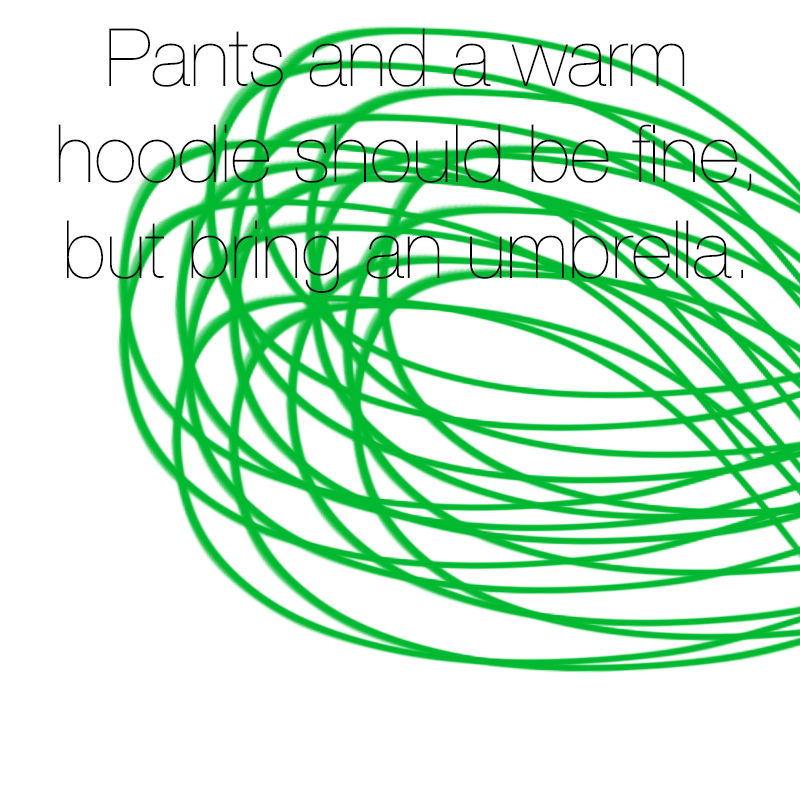
<style>
.page{position:relative;width:800px;height:800px;background:#ffffff}
.page>*{position:absolute;margin:0}
.t1{font:80px "HelveticaNeue-UltraLight";color:#000000}
</style>
<div class="page">
<p class="t1" style="left:58px;top:28px;width:694px;height:265px;text-align:center">Pants and a warm <br>hoodie should be fine,<br>but bring an umbrella.</p>
</div>
